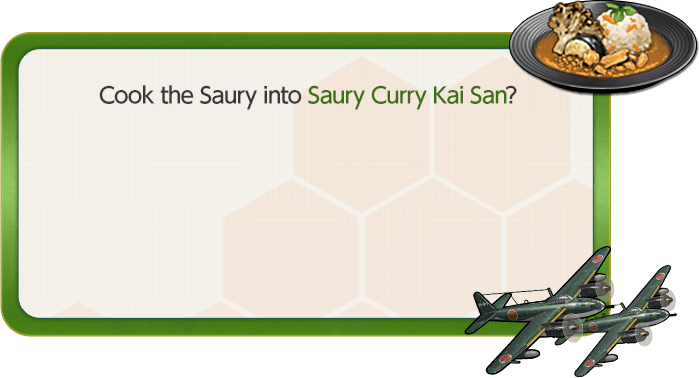
<style>
.page{position:relative;width:699px;height:378px;background:#ffffff}
.page>*{position:absolute;margin:0}
.t1{font:22px "UDShinGoPro-Medium";letter-spacing:-0.04em;color:#3b3935}
.t2{font:22px "UDShinGoPro-Medium";letter-spacing:-0.04em;color:#3e7115}
</style>
<div class="page">
<p class="t1" style="left:99px;top:85px;width:418px;height:25px">Cook the Saury into <span class="t2">Saury Curry Kai San</span>?</p>
</div>
